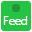
<style>
.page{position:relative;width:32px;height:32px;background:#24c342}
.page>*{position:absolute;margin:0}
.t1{font:12px "MyriadHebrew-Regular";color:#f4f4f4}
</style>
<div class="page">
<p class="t1" style="left:3px;top:16px;width:25px;height:9px">Feed</p>
</div>
